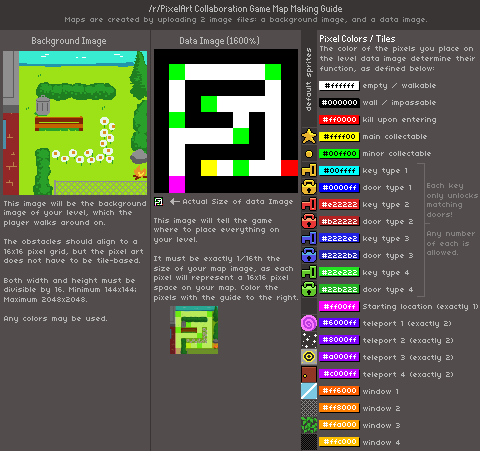
<style>
.page{position:relative;width:480px;height:451px;background:#534c4c}
.page>*{position:absolute;margin:0}
.t1{font:16px "Thintel";color:#bababa}
.t2{font:8px "04b03";color:#8d8c8c}
.t3{font:8px "04b03";color:#b5b5b5}
.t4{font:16px "Thintel";color:#ffffff}
.t5{font:8px "04b03";color:#bababa}
.t6{font:8px/17px "04b03";color:#ffffff}
.t7{font:8px/17px "04b03";color:#000000}
.t8{font:8px/16px "04b03";color:#ffffff}
.t9{font:8px/17px "04b03";color:#b9b9b9}
.t10{font:8px "04b03";color:#858282}
.t11{font:8px "04b03";color:#bbb6b6}
</style>
<div class="page">
<p class="t1" style="left:149px;top:5px;width:193px;height:10px">/r/PixelArt Collaboration Game Map Making Guide</p>
<p class="t2" style="left:65px;top:17px;width:362px;height:7px">Maps are created by uploading 2 image files: a background image, and a data image.</p>
<p class="t1" style="left:32px;top:37px;width:74px;height:10px">Background Image</p>
<p class="t1" style="left:180px;top:36px;width:79px;height:11px">Data Image (1600%)</p>
<p class="t3" style="left:320px;top:35px;width:155px;height:37px"><span class="t4">Pixel Colors / Tiles<br></span>The color of the pixels you place on the level data image determine their function, as defined below:</p>
<p class="t5" style="left:306px;top:48px;width:7px;height:63px;rotate:-90deg">default sprites</p>
<p class="t6" style="left:322px;top:83px;width:35px;height:361px;text-align:center"><span class="t7">#ffffff<br></span>#000000<br>#ff0000<br><span class="t7">#ffff00<br>#00ff00<br>#00ffff<br></span>#0000ff<br>#e22222<br>#b22222<br>#2222e2<br>#2222b2<br>#22e222<br>#22b222<br>#ff00ff<br><span class="t8">#6000ff<br></span>#8000ff<br>#a000ff<br>#c000ff<br>#ff6000<br>#ff8000<br>#ffa000<br>#ffc000</p>
<p class="t9" style="left:363px;top:83px;width:115px;height:362px">empty / walkable<br>wall / impassable<br>kill upon entering<br>main collectable<br>minor collectable<br>key type 1<br>door type 1<br>key type 2<br>door type 2<br>key type 3<br>door type 3<br>key type 4<br>door type 4<br>Starting location (exactly 1)<br>teleport 1 (exactly 2)<br>teleport 2 (exactly 2)<br>teleport 3 (exactly 2)<br>teleport 4 (exactly 2)<br>window 1<br>window 2<br>window 3<br>window 4</p>
<p class="t10" style="left:427px;top:183px;width:51px;height:72px">Each key<br>only unlocks<br>matching <br>doors!<br><br>Any number <br>of each is<br>allowed.</p>
<p class="t3" style="left:4px;top:201px;width:142px;height:122px">This image will be the background image of your level, which the player walks around on. <br><br>The obstacles should align to a 16x16 pixel grid, but the pixel art does not have to be tile-based.<br><br>Both width and height must be divisible by 16. Minimum 144x144; Maximum 2048x2048.<br><br>Any colors may be used.</p>
<p class="t11" style="left:183px;top:199px;width:110px;height:7px">Actual Size of data Image</p>
<p class="t3" style="left:154px;top:218px;width:144px;height:84px">This image will tell the game where to place everything on your level.<br><br>It must be exactly 1/16th the size of your map image, as each pixel will represent a 16x16 pixel space on your map. Color the pixels with the guide to the right.</p>
</div>
